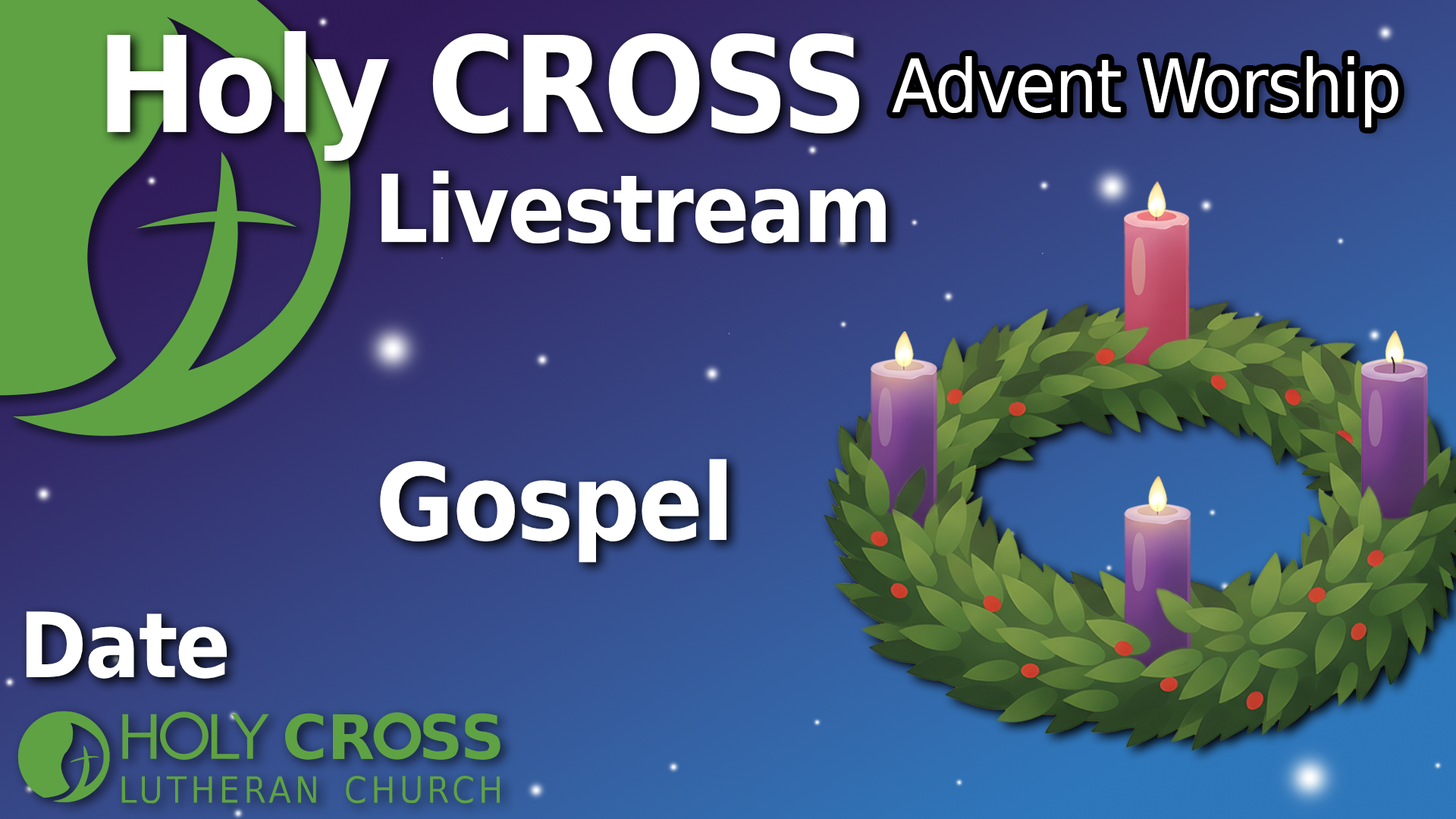
<style>
.page{position:relative;width:1456px;height:819px}
.page>*{position:absolute;margin:0}
.t1{font:132.8px "DejaVuSans-Bold";letter-spacing:-0.025em;color:#ffffff;scale:0.91 1}
.t2{font:74.2px "DejaVuSans";letter-spacing:-0.025em;color:#ffffff;scale:0.91 1}
.t3{font:94.4px "DejaVuSans-Bold";letter-spacing:-0.025em;color:#ffffff;scale:0.91 1}
.t4{font:106.2px "DejaVuSans-Bold";letter-spacing:-0.025em;color:#ffffff;scale:0.91 1}
.t5{font:90.1px "DejaVuSans-Bold";letter-spacing:-0.025em;color:#ffffff;scale:0.91 1}
</style>
<div class="page">
<p class="t1" style="left:107px;top:31px;width:752px;height:130px">Holy CROSS</p>
<p class="t2" style="left:892px;top:56px;width:506px;height:71px">Advent Worship</p>
<p class="t3" style="left:381px;top:171px;width:505px;height:72px">Livestream</p>
<p class="t4" style="left:380px;top:459px;width:346px;height:104px">Gospel</p>
<p class="t5" style="left:26px;top:611px;width:201px;height:68px">Date</p>
</div>
